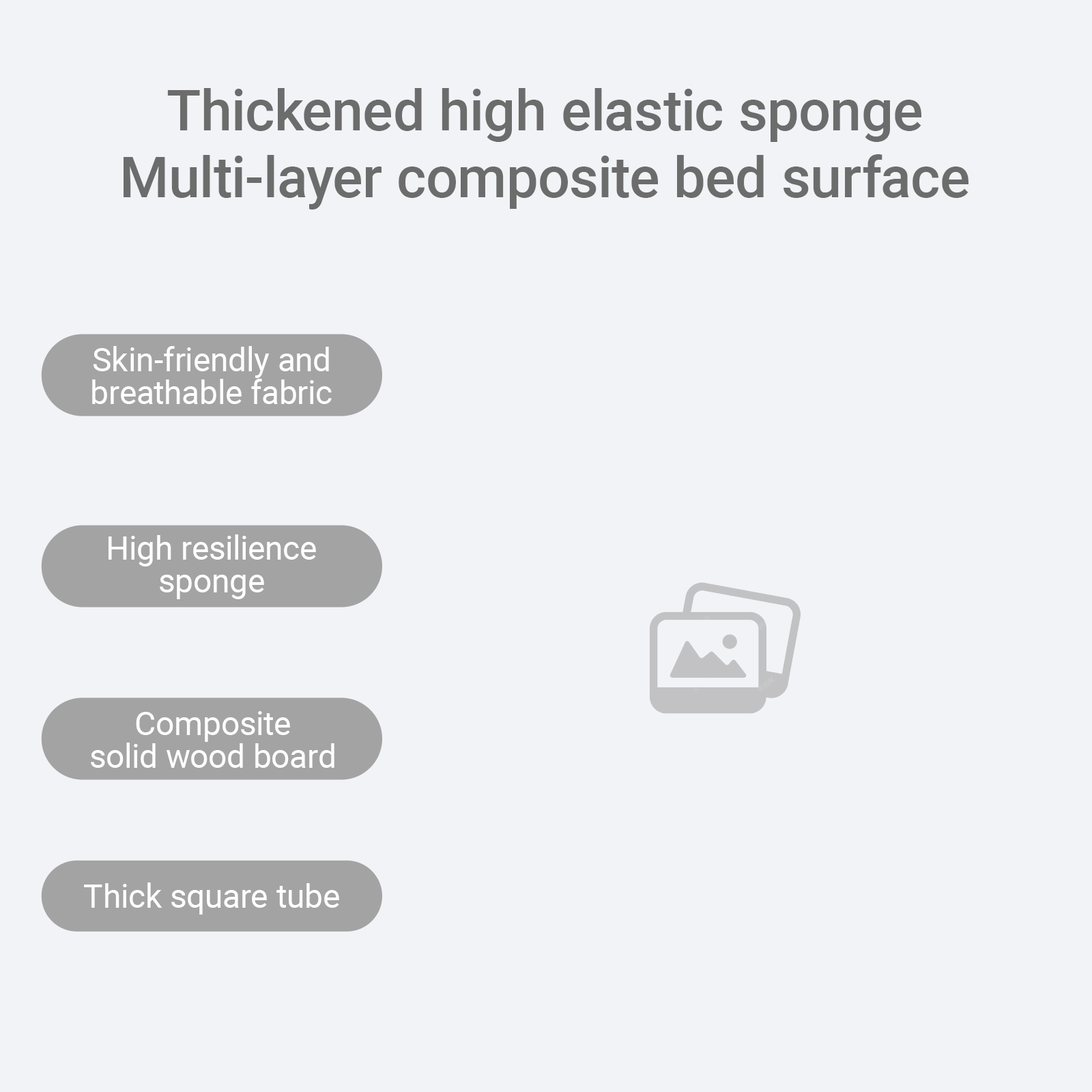
<style>
.page{position:relative;width:1092px;height:1092px;background:#f2f3f6}
.page>*{position:absolute;margin:0}
.t1{font:56.8px/67px "Roboto-Medium";color:#6c6c6c}
.t2{font:32.8px/32.8px "Roboto-Regular";color:#ffffff}
.t3{font:32.8px "Roboto-Regular";color:#ffffff}
</style>
<div class="page">
<p class="t1" style="left:124px;top:88px;width:844px;height:122px;text-align:center">Thickened high elastic sponge<br>Multi-layer composite bed surface</p>
<p class="t2" style="left:92px;top:346px;width:240px;height:58px;text-align:center">Skin-friendly and<br>breathable fabric</p>
<p class="t2" style="left:109px;top:534px;width:207px;height:65px;text-align:center">High resilience<br>sponge</p>
<p class="t2" style="left:91px;top:711px;width:243px;height:57px;text-align:center">Composite<br>solid wood board</p>
<p class="t3" style="left:84px;top:882px;width:255px;height:33px">Thick square tube</p>
</div>
